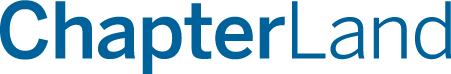
<style>
.page{position:relative;width:451px;height:74px;background:#ffffff}
.page>*{position:absolute;margin:0}
.t1{font:77.3px "BentonSans-Medium";letter-spacing:-0.02em;color:#00629b}
.t2{font:77.3px "BentonSans-Book";letter-spacing:-0.02em;color:#00629b}
</style>
<div class="page">
<p class="t1" style="left:0px;top:0px;width:452px;height:74px">Chapter<span class="t2">Land</span></p>
</div>
